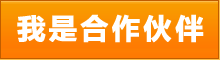
<style>
.page{position:relative;width:220px;height:60px}
.page>*{position:absolute;margin:0}
.t1{font:28px "MicrosoftYaHei";letter-spacing:0.1em;color:#ffffff;font-weight:bold}
</style>
<div class="page">
<p class="t1" style="left:17px;top:14px;width:187px;height:29px">我是合作伙伴</p>
</div>
